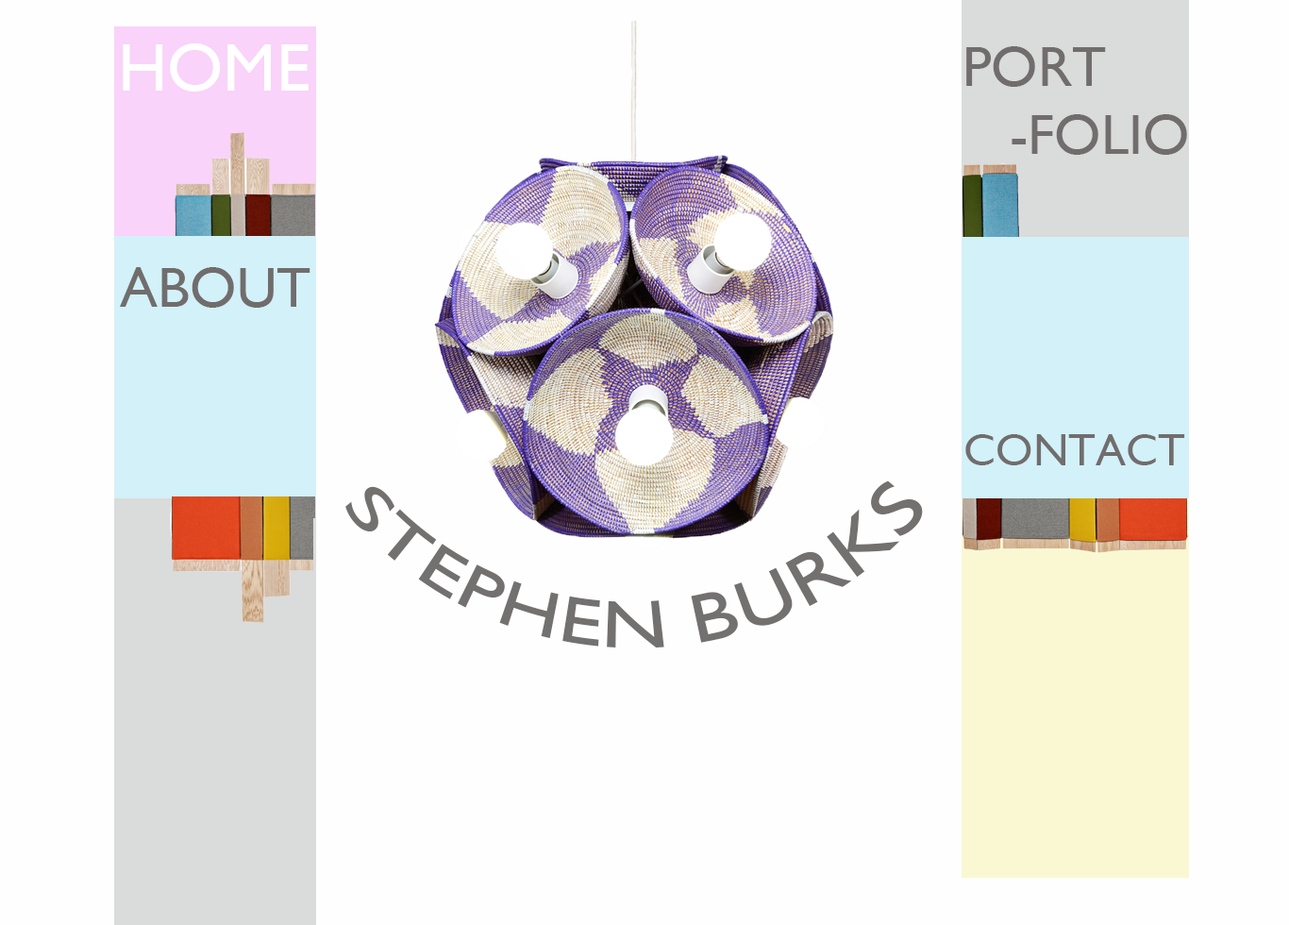
<style>
.page{position:relative;width:1289px;height:925px;background:#fffefe}
.page>*{position:absolute;margin:0}
.t1{font:68px "GillSans";color:#ffffff}
.t2{font:56.6px "GillSans";color:#716d6d}
.t3{font:45.3px "GillSans";color:#716d6d}
.t4{font:68px "GillSans";color:#737070}
</style>
<div class="page">
<p class="t1" style="left:123px;top:43px;width:186px;height:49px">HOME</p>
<p class="t2" style="left:966px;top:46px;width:221px;height:109px">PORT<br>   -FOLIO</p>
<p class="t2" style="left:120px;top:267px;width:191px;height:41px">ABOUT</p>
<p class="t3" style="left:966px;top:434px;width:219px;height:31px">CONTACT</p>
<p class="t4" style="left:345px;top:480px;width:578px;height:168px">STEPHEN BURKS</p>
</div>
